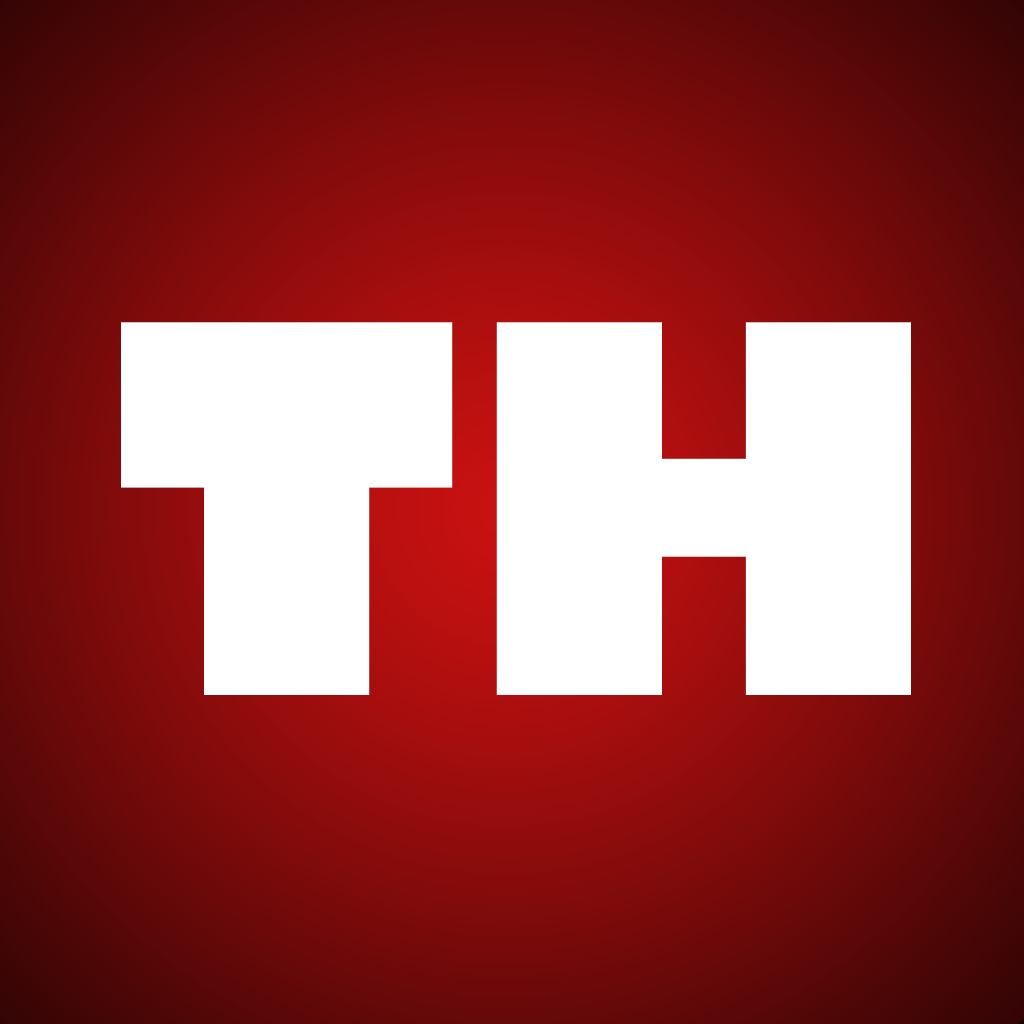
<style>
.page{position:relative;width:1024px;height:1024px;background:#ffffff}
.page>*{position:absolute;margin:0}
.t1{font:500px "GillSans-UltraBold";color:#ffffff}
</style>
<div class="page">
<p class="t1" style="left:121px;top:322px;width:790px;height:373px">TH</p>
</div>
